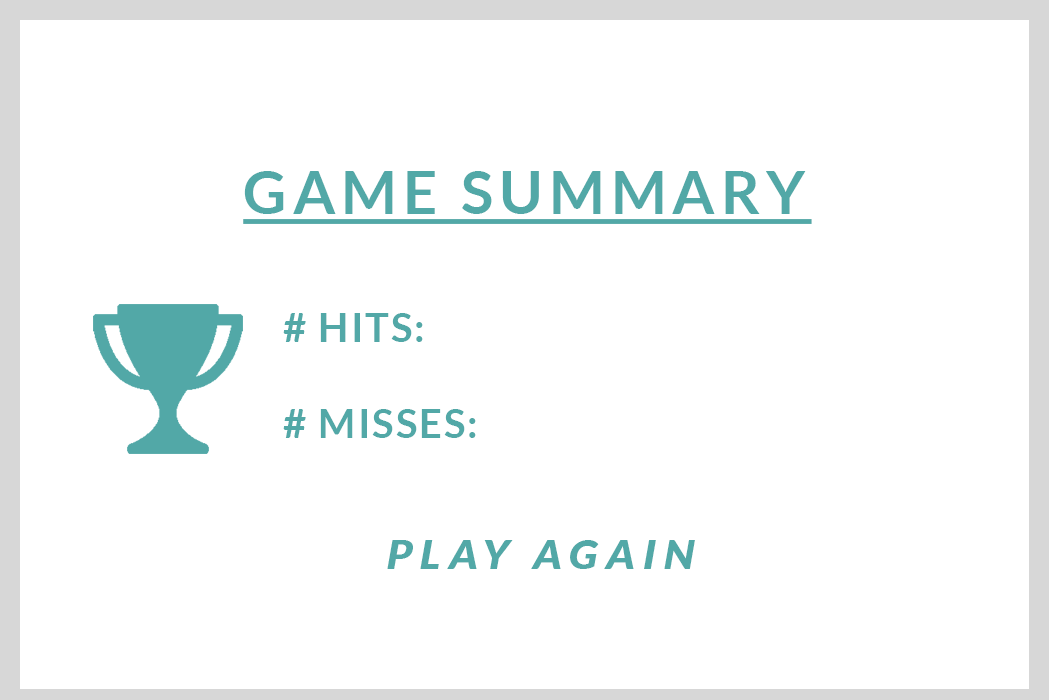
<style>
.page{position:relative;width:1049px;height:700px;background:#ffffff}
.page>*{position:absolute;margin:0}
.t1{font:60px "Lato-Bold";letter-spacing:0.1em;color:#52a8a7;text-decoration:underline}
.t2{font:40px "Lato-Bold";letter-spacing:0.05em;color:#52a8a7}
.t3{font:40px "Lato-Black";letter-spacing:0.2em;color:#52a8a7;font-style:italic}
</style>
<div class="page">
<p class="t1" style="left:243px;top:171px;width:569px;height:53px">GAME SUMMARY</p>
<p class="t2" style="left:283px;top:313px;width:193px;height:125px"># HITS:<br><br># MISSES:</p>
<p class="t3" style="left:387px;top:540px;width:308px;height:29px">PLAY AGAIN</p>
</div>
